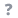
<style>
.page{position:relative;width:18px;height:18px;background:#ffffff}
.page>*{position:absolute;margin:0}
.t1{font:15.6px "OpenSans-Extrabold";color:#8e949e;text-transform:uppercase}
</style>
<div class="page">
<p class="t1" style="left:4px;top:3px;width:9px;height:13px">?</p>
</div>
